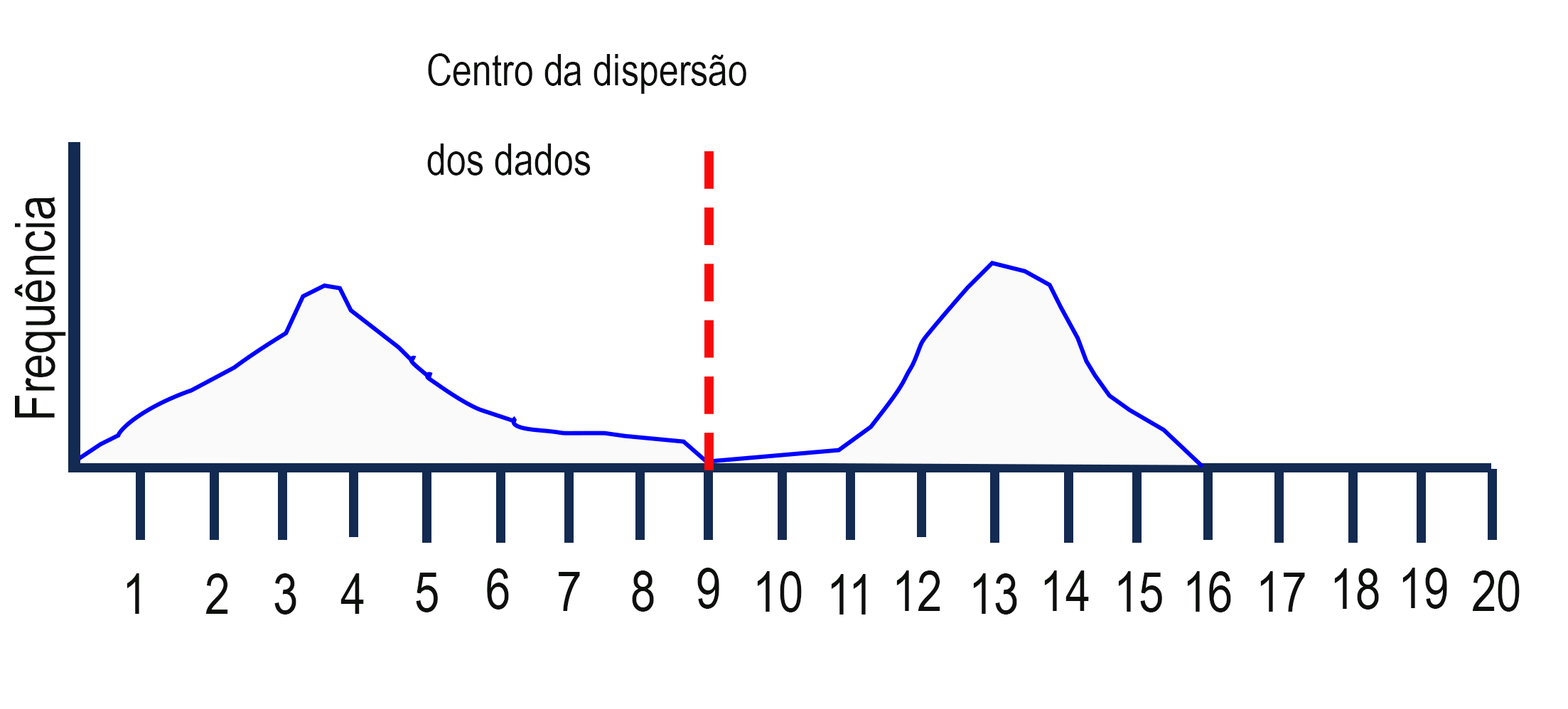
<style>
.page{position:relative;width:1568px;height:709px;background:#ffffff}
.page>*{position:absolute;margin:0}
.t1{font:74.7px "ArialNarrow";color:#0d0f0d}
.t2{font:94.8px "ArialNarrow";color:#0d0f0d}
</style>
<div class="page">
<p class="t1" style="left:427px;top:53px;width:319px;height:123px">Centro da dispersão <br>dos dados</p>
<p class="t2" style="left:14px;top:197px;width:52px;height:221px;rotate:-90deg">Frequência</p>
<p class="t2" style="left:487px;top:569px;width:22px;height:41px">6</p>
<p class="t2" style="left:697px;top:568px;width:22px;height:41px">9</p>
<p class="t2" style="left:1334px;top:569px;width:45px;height:41px">18</p>
<p class="t2" style="left:1402px;top:568px;width:45px;height:41px">19</p>
<p class="t2" style="left:127px;top:574px;width:12px;height:40px">1</p>
<p class="t2" style="left:205px;top:574px;width:23px;height:40px">2</p>
<p class="t2" style="left:274px;top:574px;width:22px;height:41px">3</p>
<p class="t2" style="left:340px;top:574px;width:24px;height:40px">4</p>
<p class="t2" style="left:416px;top:573px;width:22px;height:40px">5</p>
<p class="t2" style="left:559px;top:572px;width:21px;height:39px">7</p>
<p class="t2" style="left:632px;top:571px;width:22px;height:41px">8</p>
<p class="t2" style="left:757px;top:571px;width:45px;height:42px">10</p>
<p class="t2" style="left:831px;top:574px;width:35px;height:41px">11</p>
<p class="t2" style="left:896px;top:571px;width:44px;height:40px">12</p>
<p class="t2" style="left:973px;top:574px;width:44px;height:41px">13</p>
<p class="t2" style="left:1044px;top:571px;width:45px;height:40px">14</p>
<p class="t2" style="left:1118px;top:571px;width:44px;height:42px">15</p>
<p class="t2" style="left:1187px;top:571px;width:44px;height:42px">16</p>
<p class="t2" style="left:1260px;top:571px;width:45px;height:41px">17</p>
<p class="t2" style="left:1472px;top:571px;width:48px;height:41px">20</p>
</div>
